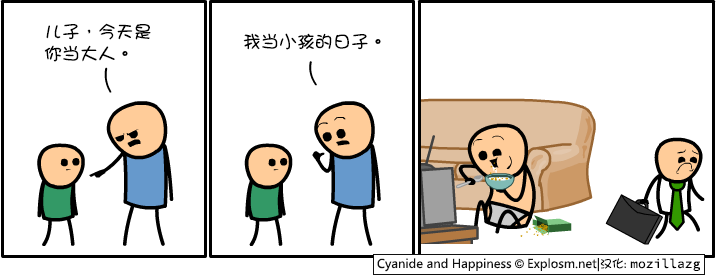
<style>
.page{position:relative;width:716px;height:276px;background:#ffffff}
.page>*{position:absolute;margin:0}
.t1{font:18px/22px "DFGirl";color:#000000}
.t2{font:18px "DFGirl";color:#000000}
</style>
<div class="page">
<p class="t1" style="left:44px;top:23px;width:107px;height:39px">儿子，今天是<br>你当大人。</p>
<p class="t2" style="left:243px;top:33px;width:138px;height:17px">我当小孩的日子。</p>
</div>
